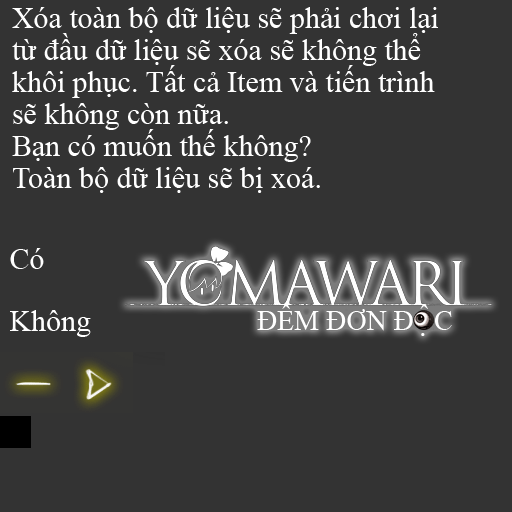
<style>
.page{position:relative;width:512px;height:512px;background:#333333}
.page>*{position:absolute;margin:0}
.t1{font:30px/32px "TimesNewRomanPSMT";color:#ffffff}
.t2{font:30px "TimesNewRomanPSMT";color:#ffffff}
</style>
<div class="page">
<p class="t1" style="left:12px;top:7px;width:426px;height:186px">Xóa toàn bộ dữ liệu sẽ phải chơi lại<br>từ đầu dữ liệu sẽ xóa sẽ không thể<br>khôi phục. Tất cả Item và tiến trình<br>sẽ không còn nữa.<br>Bạn có muốn thế không?<br>Toàn bộ dữ liệu sẽ bị xoá.</p>
<p class="t2" style="left:10px;top:248px;width:34px;height:21px">Có</p>
<p class="t2" style="left:10px;top:310px;width:81px;height:27px">Không</p>
</div>
